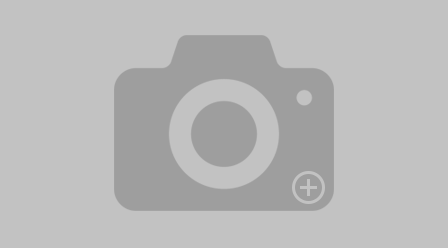
<style>
.page{position:relative;width:448px;height:248px;background:#c2c2c2}
.page>*{position:absolute;margin:0}
.t1{font:36px "ArialMT";color:#c2c2c2}
</style>
<div class="page">
<p class="t1" style="left:300px;top:179px;width:17px;height:17px">+</p>
</div>
